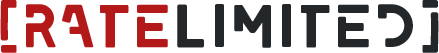
<style>
.page{position:relative;width:439px;height:53px;background:#ffffff}
.page>*{position:absolute;margin:0}
.t1{font:60px "LEIXO-Bold";color:#23272a}
.t2{font:60px "LEIXO-Bold";color:#b41919}
</style>
<div class="page">
<p class="t1" style="left:0px;top:0px;width:439px;height:53px"><span class="t2">[RATE</span>LIMITED]</p>
</div>
